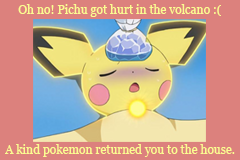
<style>
.page{position:relative;width:240px;height:160px;background:#dc817d}
.page>*{position:absolute;margin:0}
.t1{font:12px "Georgia";color:#fcfe91}
</style>
<div class="page">
<p class="t1" style="left:18px;top:4px;width:203px;height:13px">Oh no! Pichu got hurt in the volcano :(</p>
<p class="t1" style="left:5px;top:144px;width:230px;height:13px">A kind pokemon returned you to the house.</p>
</div>
